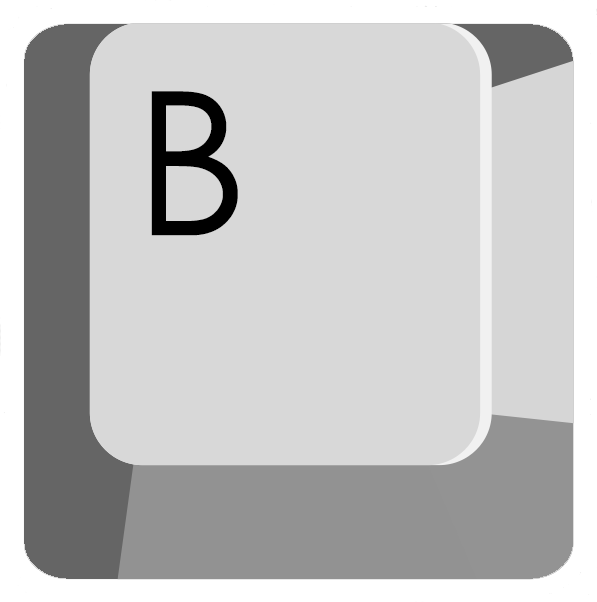
<style>
.page{position:relative;width:597px;height:602px;background:#d8d8d8}
.page>*{position:absolute;margin:0}
.t1{font:200px "CenturyGothic";color:#000000}
</style>
<div class="page">
<p class="t1" style="left:151px;top:91px;width:87px;height:145px">B</p>
</div>
